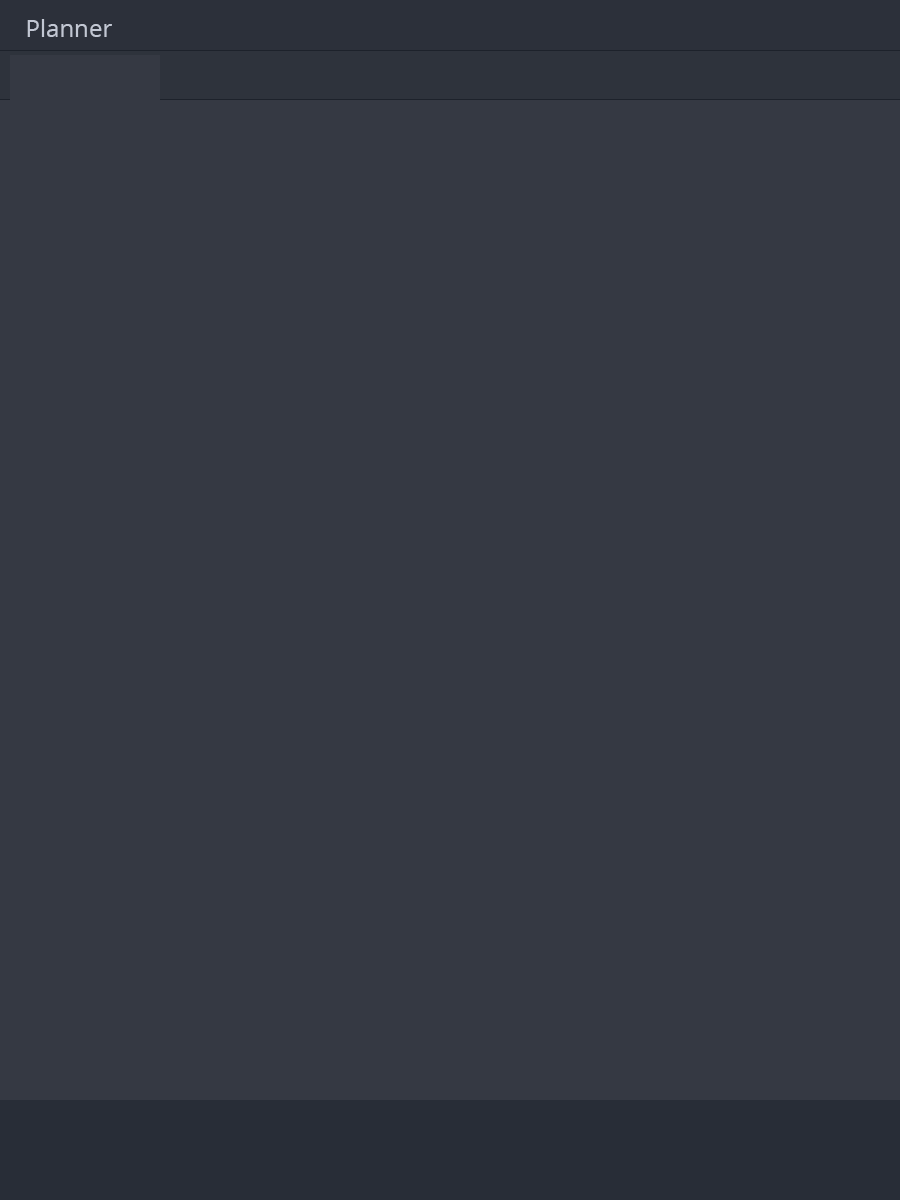
<style>
.page{position:relative;width:900px;height:1200px;background:#353943}
.page>*{position:absolute;margin:0}
.t1{font:24px "OpenSans";color:#c2c7d3}
</style>
<div class="page">
<p class="t1" style="left:27px;top:19px;width:85px;height:18px">Planner</p>
</div>
